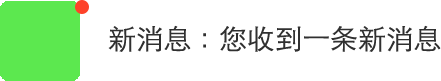
<style>
.page{position:relative;width:441px;height:81px;background:#ffffff}
.page>*{position:absolute;margin:0}
.t1{font:27.8px "STHeitiTC-Light";color:#303030}
</style>
<div class="page">
<p class="t1" style="left:108px;top:25px;width:333px;height:27px">新消息：您收到一条新消息</p>
</div>
